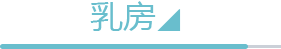
<style>
.page{position:relative;width:281px;height:49px;background:#ffffff}
.page>*{position:absolute;margin:0}
.t1{font:33px "MicrosoftYaHei";color:#69becd}
</style>
<div class="page">
<p class="t1" style="left:90px;top:1px;width:66px;height:30px">乳房</p>
</div>
